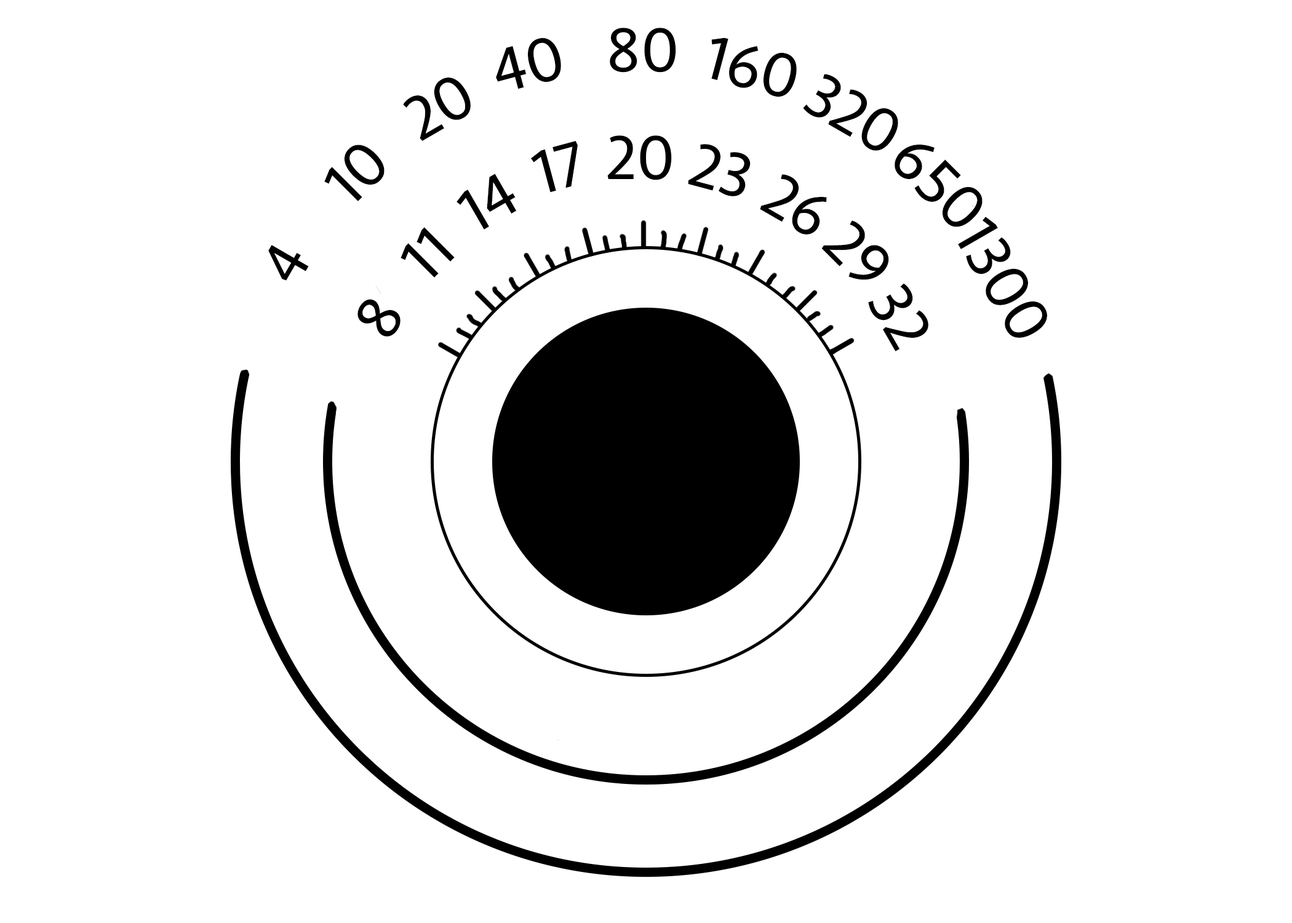
<style>
.page{position:relative;width:1292px;height:923px;background:#ffffff}
.page>*{position:absolute;margin:0}
.t1{font:64.1px/35.9px "Seravek";color:#000000}
</style>
<div class="page">
<p class="t1" style="left:607px;top:28px;width:69px;height:152px">80<br><br><br>20</p>
<p class="t1" style="left:496px;top:38px;width:82px;height:155px;rotate:-15deg">40<br><br><br> 17</p>
<p class="t1" style="left:688px;top:38px;width:109px;height:158px;rotate:15deg">160<br><br><br> 23</p>
<p class="t1" style="left:403px;top:78px;width:114px;height:151px;rotate:-30deg">20<br><br><br>14</p>
<p class="t1" style="left:760px;top:74px;width:138px;height:160px;rotate:30deg">320<br><br><br> 26</p>
<p class="t1" style="left:324px;top:145px;width:131px;height:132px;rotate:-45deg">10<br><br><br>11</p>
<p class="t1" style="left:821px;top:145px;width:162px;height:135px;rotate:45deg">650<br><br><br> 29</p>
<p class="t1" style="left:868px;top:217px;width:179px;height:134px;rotate:60deg">1300<br><br><br> 32</p>
<p class="t1" style="left:268px;top:245px;width:133px;height:92px;rotate:-60deg">4<br><br><br>8</p>
</div>
